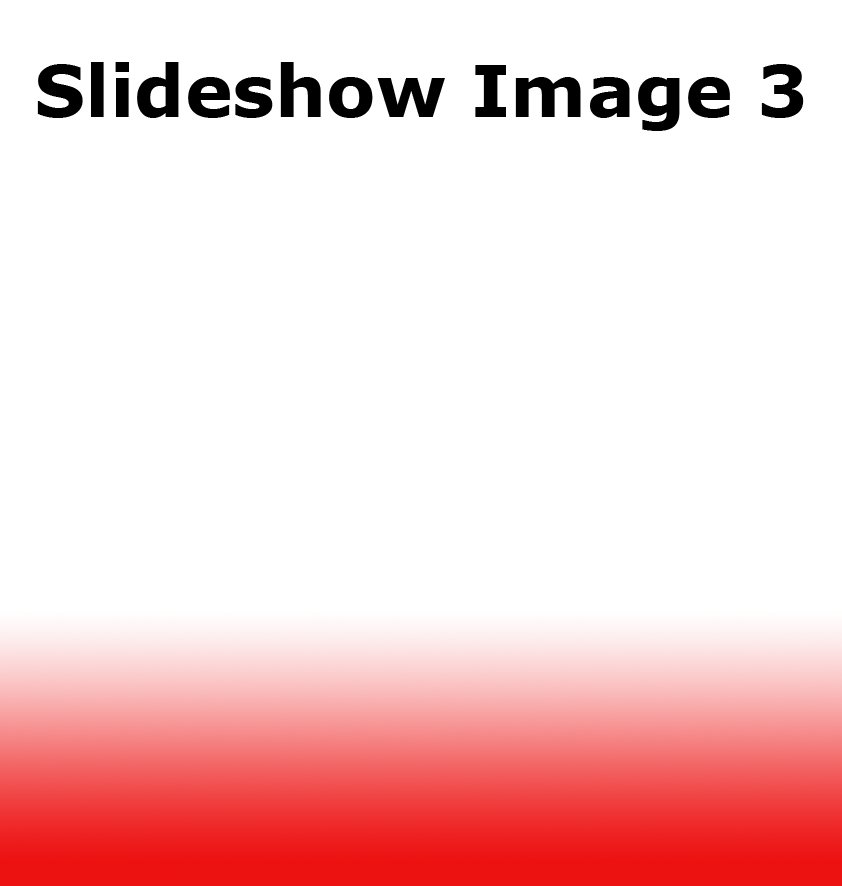
<style>
.page{position:relative;width:842px;height:886px;background:#ffffff}
.page>*{position:absolute;margin:0}
.t1{font:72px "Verdana-Bold";color:#000000}
</style>
<div class="page">
<p class="t1" style="left:37px;top:62px;width:767px;height:69px">Slideshow Image 3</p>
</div>
